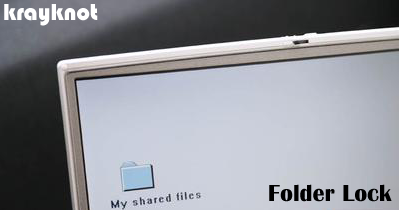
<style>
.page{position:relative;width:399px;height:210px}
.page>*{position:absolute;margin:0}
.t1{font:24px "Bauhaus93";color:#ffffff}
.t2{font:24px "BritannicBold";color:#000000}
</style>
<div class="page">
<p class="t1" style="left:4px;top:4px;width:94px;height:22px">krayknot</p>
<p class="t2" style="left:269px;top:184px;width:123px;height:18px">Folder Lock</p>
</div>
